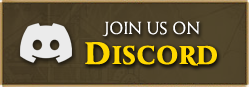
<style>
.page{position:relative;width:249px;height:87px}
.page>*{position:absolute;margin:0}
.t1{font:19px "MonktonRegular";letter-spacing:0.025em;color:#ffffff}
.t2{font:28px "MonktonBold";letter-spacing:0.025em;color:#ffd800}
.t3{font:34px "MonktonBold";letter-spacing:0.025em;color:#ffd800}
</style>
<div class="page">
<p class="t1" style="left:102px;top:21px;width:98px;height:16px">JOIN US ON</p>
<p class="t2" style="left:85px;top:42px;width:132px;height:24px"><span class="t3">D</span>ISCORD</p>
</div>
